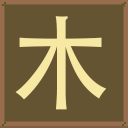
<style>
.page{position:relative;width:128px;height:128px;background:#645432}
.page>*{position:absolute;margin:0}
.t1{font:100.9px "AdobeHeitiStd-Regular";color:#f7e9a3}
</style>
<div class="page">
<p class="t1" style="left:15px;top:16px;width:92px;height:94px">木</p>
</div>
